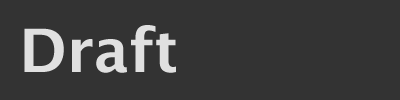
<style>
.page{position:relative;width:400px;height:100px;background:#333333}
.page>*{position:absolute;margin:0}
.t1{font:60px "LucidaGrande-Bold";color:#e0e0e0}
</style>
<div class="page">
<p class="t1" style="left:24px;top:25px;width:152px;height:48px">Draft</p>
</div>
